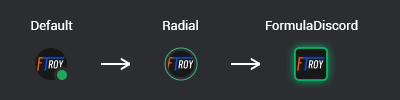
<style>
.page{position:relative;width:400px;height:100px;background:#2b2d31}
.page>*{position:absolute;margin:0}
.t1{font:13px "Roboto-Regular";color:#ffffff}
</style>
<div class="page">
<p class="t1" style="left:31px;top:20px;width:42px;height:10px">Default</p>
<p class="t1" style="left:163px;top:20px;width:35px;height:10px">Radial</p>
<p class="t1" style="left:266px;top:20px;width:92px;height:10px">FormulaDiscord</p>
</div>
